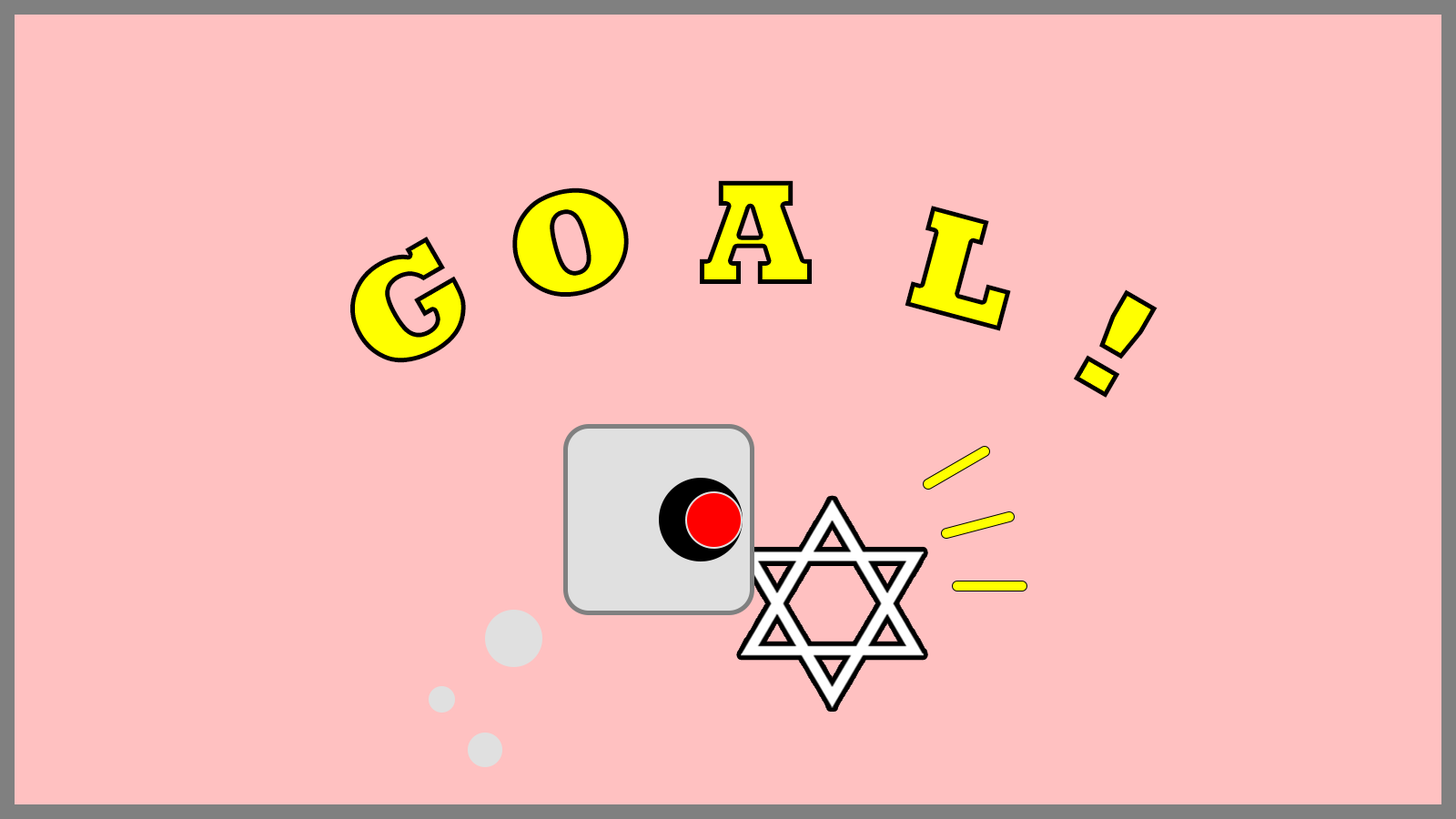
<style>
.page{position:relative;width:1456px;height:819px;background:#ffc1c1}
.page>*{position:absolute;margin:0}
.t1{font:151.7px "Rockwell-ExtraBold";letter-spacing:-0.075em;color:#ffff00}
.t2{font:151.7px "Rockwell-ExtraBold";letter-spacing:-0.075em}
</style>
<div class="page">
<p class="t1" style="left:700px;top:180px;width:112px;height:104px">A</p>
<p class="t1" style="left:512px;top:187px;width:117px;height:110px;rotate:-15deg">O</p>
<p class="t1" style="left:905px;top:206px;width:106px;height:125px;rotate:15deg">L</p>
<p class="t1" style="left:350px;top:237px;width:116px;height:126px;rotate:-30deg">G</p>
<p class="t2" style="left:1074px;top:289px;width:84px;height:109px;rotate:30deg">!</p>
</div>
